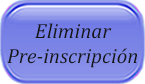
<style>
.page{position:relative;width:145px;height:84px}
.page>*{position:absolute;margin:0}
.t1{font:20.8px "Cambria-Italic";color:#171717}
</style>
<div class="page">
<p class="t1" style="left:7px;top:23px;width:130px;height:45px;text-align:center">Eliminar<br>Pre-inscripción</p>
</div>
